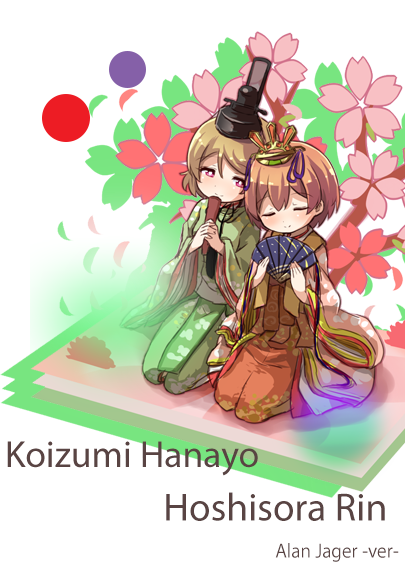
<style>
.page{position:relative;width:405px;height:568px;background:#ffffff}
.page>*{position:absolute;margin:0}
.t1{font:37.7px "MyriadPro-Regular";color:#594443}
.t2{font:39.4px "MyriadPro-Regular";color:#594443}
.t3{font:18px "KozGoPr6N-Regular";color:#594443}
</style>
<div class="page">
<p class="t1" style="left:7px;top:441px;width:251px;height:35px">Koizumi Hanayo</p>
<p class="t2" style="left:166px;top:492px;width:219px;height:29px">Hoshisora Rin</p>
<p class="t3" style="left:275px;top:543px;width:124px;height:19px">Alan Jager -ver-</p>
</div>
